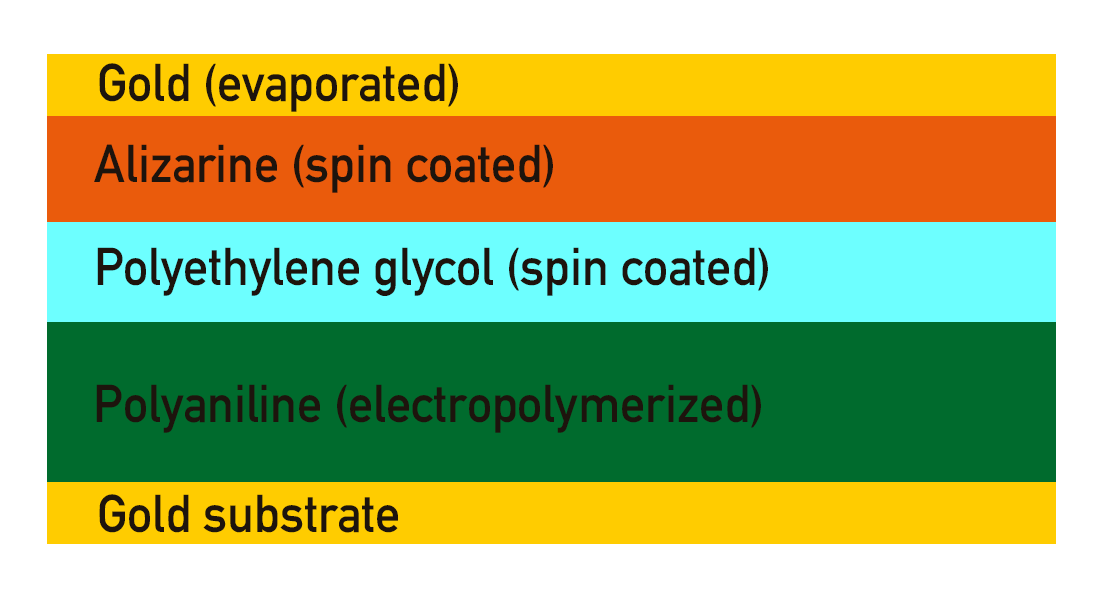
<style>
.page{position:relative;width:1104px;height:592px;background:#ffffff}
.page>*{position:absolute;margin:0}
.t1{font:52.5px "DIN-1451-Mittelschrift-Regular";color:#1d140d;scale:0.95 1}
</style>
<div class="page">
<p class="t1" style="left:99px;top:63px;width:359px;height:49px">Gold (evaporated)</p>
<p class="t1" style="left:94px;top:144px;width:459px;height:49px">Alizarine (spin coated)</p>
<p class="t1" style="left:97px;top:247px;width:671px;height:49px">Polyethylene glycol (spin coated)</p>
<p class="t1" style="left:96px;top:384px;width:665px;height:49px">Polyaniline (electropolymerized)</p>
<p class="t1" style="left:99px;top:494px;width:299px;height:39px">Gold substrate</p>
</div>
